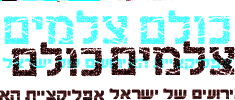
<style>
.page{position:relative;width:235px;height:100px;background:#ffffff}
.page>*{position:absolute;margin:0}
.t1{font:40.5px "ANSbrokenglass";color:#40ffff}
.t2{font:18.6px "ANSlinkin-park"}
</style>
<div class="page">
<p class="t1" style="left:3px;top:10px;width:227px;height:35px">םימלצ םלוכ</p>
<p class="t2" style="left:2px;top:57px;width:231px;height:13px">FFFFGFלארשי לש םיעוריאה תייצקילפא</p>
</div>
